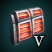
<style>
.page{position:relative;width:52px;height:52px}
.page>*{position:absolute;margin:0}
.t1{font:14px "Vani";color:#dadada}
</style>
<div class="page">
<p class="t1" style="left:33px;top:36px;width:11px;height:10px">V</p>
</div>
